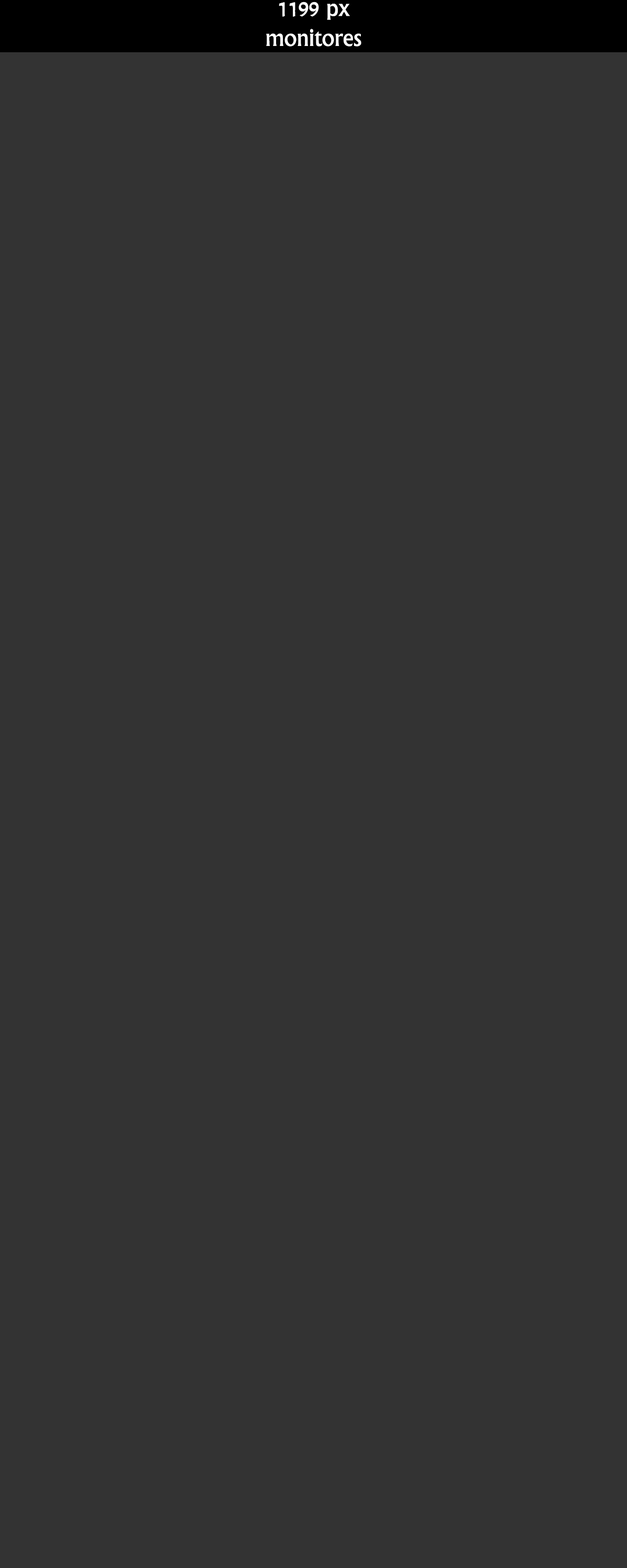
<style>
.page{position:relative;width:627px;height:1568px;background:#333333}
.page>*{position:absolute;margin:0}
.t1{font:25px "Narkisim";color:#ffffff}
</style>
<div class="page">
<p class="t1" style="left:266px;top:2px;width:95px;height:45px;text-align:center">1199 px<br>monitores</p>
</div>
